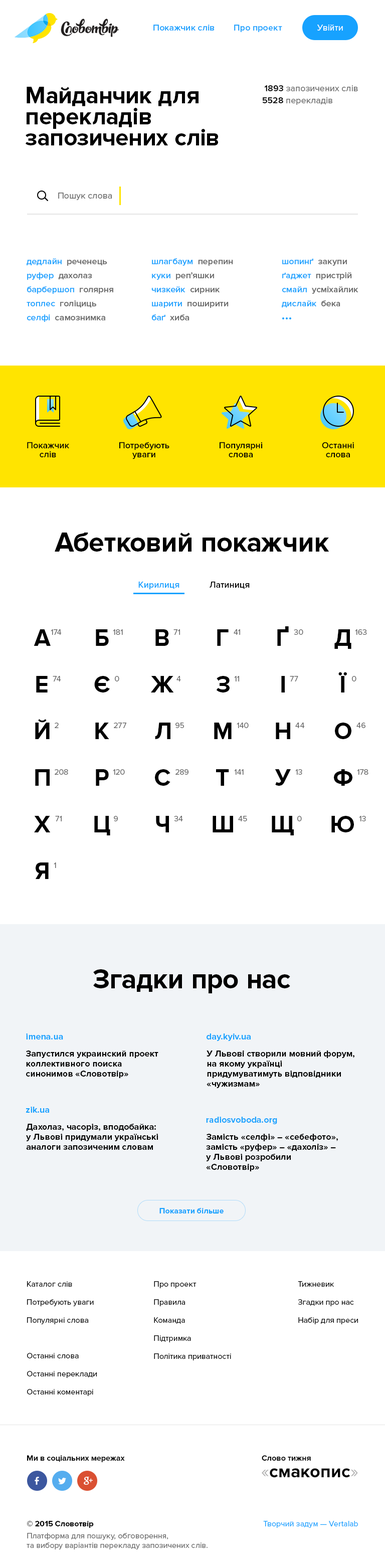
<style>
.page{position:relative;width:385px;height:1568px;background:#ffffff}
.page>*{position:absolute;margin:0}
.t1{font:9px "ProximaNova-Semibold";color:#17a2ff}
.t2{font:9px "ProximaNova-Regular";color:#ffffff}
.t3{font:24.1px/21.1px "ProximaNova-Bold";color:#000000}
.t4{font:9px "ProximaNova-Regular";color:#666666}
.t5{font:9px "ProximaNova-Semibold";color:#000000}
.t6{font:9px/14px "ProximaNova-Semibold";color:#666666}
.t7{font:9px/14px "ProximaNova-Semibold";color:#17a2ff}
.t8{font:9px/9px "ProximaNova-Semibold";color:#000000}
.t9{font:28.1px "ProximaNova-Bold";color:#000000}
.t10{font:24.1px "ProximaNova-Bold";color:#000000}
.t11{font:8px "ProximaNova-Regular";color:#666666}
.t12{font:9px "ProximaNova-Bold";color:#17a2ff}
.t13{font:9px/10px "ProximaNova-Bold";color:#000000}
.t14{font:8px "ProximaNova-Bold";color:#17a2ff}
.t15{font:8px/18.1px "ProximaNova-Regular";color:#000000}
.t16{font:8px/18.1px "ProximaNova-Regular";color:#010101}
.t17{font:8px "ProximaNova-Bold";color:#010101}
.t18{font:18px "ProximaNova-Bold";color:#000000}
.t19{font:18.1px "ProximaNova-Regular";color:#b3b3b3}
.t20{font:8px/11px "ProximaNova-Bold";color:#000000}
.t21{font:8px/12px "ProximaNova-Regular";color:#666666}
.t22{font:8px "ProximaNova-Regular";color:#17a2ff}
</style>
<div class="page">
<p class="t1" style="left:153px;top:25px;width:62px;height:6px">Покажчик слів</p>
<p class="t1" style="left:234px;top:25px;width:48px;height:7px">Про проект</p>
<p class="t2" style="left:317px;top:24px;width:26px;height:7px">Увійти</p>
<p class="t3" style="left:25px;top:87px;width:193px;height:58px">Майданчик для<br>перекладів<br>запозичених слів</p>
<p class="t4" style="left:264px;top:85px;width:94px;height:6px"><span class="t5">1893</span> запозичених слів</p>
<p class="t4" style="left:262px;top:97px;width:70px;height:8px"><span class="t5">5528</span> перекладів</p>
<p class="t4" style="left:58px;top:193px;width:54px;height:7px">Пошук слова</p>
<p class="t6" style="left:27px;top:258px;width:86px;height:64px"><span class="t7">дедлайн  </span>реченeць<br><span class="t7">руфер  </span>дахолаз<br><span class="t7">барбершоп  </span>голярня<br><span class="t7">топлес  </span>голіциць<br><span class="t7">селфі  </span>самознимка</p>
<p class="t7" style="left:151px;top:258px;width:82px;height:62px">шлагбаум  <span class="t6">перепин<br></span>куки  <span class="t6">реп’яшки<br></span>чизкейк  <span class="t6">сирник<br></span>шарити  <span class="t6">поширити<br></span>баґ  <span class="t6">хиба</span></p>
<p class="t6" style="left:282px;top:258px;width:77px;height:50px"><span class="t7">шопинґ  </span>закупи<br><span class="t7">ґаджет  </span>пристрій<br><span class="t7">смайл  </span>усміхайлик<br><span class="t7">дислайк  </span>бека</p>
<p class="t8" style="left:27px;top:442px;width:42px;height:15px;text-align:center">Покажчик<br>слів</p>
<p class="t8" style="left:119px;top:442px;width:50px;height:17px;text-align:center">Потребують<br>уваги</p>
<p class="t8" style="left:220px;top:442px;width:42px;height:15px;text-align:center">Популярні<br>слова</p>
<p class="t8" style="left:322px;top:442px;width:32px;height:15px;text-align:center">Останні<br>слова</p>
<p class="t9" style="left:55px;top:533px;width:274px;height:19px">Абетковий покажчик</p>
<p class="t1" style="left:138px;top:581px;width:42px;height:9px">Кирилиця</p>
<p class="t5" style="left:210px;top:581px;width:40px;height:8px">Латиниця</p>
<p class="t10" style="left:34px;top:629px;width:17px;height:17px">А</p>
<p class="t11" style="left:51px;top:629px;width:11px;height:6px">174</p>
<p class="t10" style="left:96px;top:629px;width:13px;height:17px">Б</p>
<p class="t11" style="left:113px;top:629px;width:10px;height:6px">181</p>
<p class="t10" style="left:155px;top:629px;width:14px;height:17px">В</p>
<p class="t11" style="left:173px;top:629px;width:7px;height:6px">71</p>
<p class="t10" style="left:217px;top:629px;width:12px;height:17px">Г</p>
<p class="t11" style="left:234px;top:629px;width:6px;height:6px">41</p>
<p class="t10" style="left:277px;top:626px;width:12px;height:20px">Ґ</p>
<p class="t11" style="left:294px;top:629px;width:9px;height:6px">30</p>
<p class="t10" style="left:334px;top:629px;width:18px;height:20px">Д</p>
<p class="t11" style="left:355px;top:629px;width:12px;height:6px">163</p>
<p class="t10" style="left:36px;top:676px;width:12px;height:16px">Е</p>
<p class="t11" style="left:53px;top:676px;width:8px;height:5px">74</p>
<p class="t10" style="left:94px;top:676px;width:16px;height:16px">Є</p>
<p class="t11" style="left:115px;top:676px;width:4px;height:5px">0</p>
<p class="t10" style="left:150px;top:676px;width:24px;height:16px">Ж</p>
<p class="t11" style="left:177px;top:676px;width:4px;height:5px">4</p>
<p class="t10" style="left:216px;top:676px;width:14px;height:16px">З</p>
<p class="t11" style="left:234px;top:676px;width:5px;height:5px">11</p>
<p class="t10" style="left:281px;top:676px;width:4px;height:16px">І</p>
<p class="t11" style="left:290px;top:676px;width:8px;height:5px">77</p>
<p class="t10" style="left:338px;top:672px;width:9px;height:20px">Ї</p>
<p class="t11" style="left:352px;top:676px;width:5px;height:5px">0</p>
<p class="t10" style="left:35px;top:719px;width:15px;height:20px">Й</p>
<p class="t11" style="left:55px;top:723px;width:4px;height:5px">2</p>
<p class="t10" style="left:95px;top:723px;width:14px;height:16px">К</p>
<p class="t11" style="left:114px;top:723px;width:12px;height:5px">277</p>
<p class="t10" style="left:155px;top:723px;width:15px;height:16px">Л</p>
<p class="t11" style="left:176px;top:723px;width:8px;height:5px">95</p>
<p class="t10" style="left:214px;top:723px;width:18px;height:16px">М</p>
<p class="t11" style="left:237px;top:723px;width:12px;height:5px">140</p>
<p class="t10" style="left:276px;top:723px;width:14px;height:16px">Н</p>
<p class="t11" style="left:295px;top:723px;width:10px;height:5px">44</p>
<p class="t10" style="left:335px;top:723px;width:17px;height:16px">О</p>
<p class="t11" style="left:357px;top:723px;width:9px;height:5px">46</p>
<p class="t10" style="left:35px;top:769px;width:15px;height:17px">П</p>
<p class="t11" style="left:55px;top:769px;width:13px;height:6px">208</p>
<p class="t10" style="left:96px;top:769px;width:13px;height:17px">Р</p>
<p class="t11" style="left:113px;top:769px;width:12px;height:6px">120</p>
<p class="t10" style="left:155px;top:769px;width:15px;height:17px">С</p>
<p class="t11" style="left:176px;top:769px;width:13px;height:6px">289</p>
<p class="t10" style="left:216px;top:769px;width:13px;height:17px">Т</p>
<p class="t11" style="left:234px;top:769px;width:10px;height:6px">141</p>
<p class="t10" style="left:275px;top:769px;width:16px;height:17px">У</p>
<p class="t11" style="left:295px;top:769px;width:7px;height:6px">13</p>
<p class="t10" style="left:334px;top:769px;width:19px;height:17px">Ф</p>
<p class="t11" style="left:357px;top:769px;width:12px;height:6px">178</p>
<p class="t10" style="left:34px;top:816px;width:17px;height:16px">Х</p>
<p class="t11" style="left:55px;top:816px;width:7px;height:5px">71</p>
<p class="t10" style="left:94px;top:816px;width:16px;height:19px">Ц</p>
<p class="t11" style="left:114px;top:816px;width:4px;height:5px">9</p>
<p class="t10" style="left:156px;top:816px;width:13px;height:16px">Ч</p>
<p class="t11" style="left:174px;top:816px;width:9px;height:5px">34</p>
<p class="t10" style="left:213px;top:816px;width:20px;height:16px">Ш</p>
<p class="t11" style="left:238px;top:816px;width:9px;height:5px">45</p>
<p class="t10" style="left:272px;top:816px;width:22px;height:19px">Щ</p>
<p class="t11" style="left:297px;top:816px;width:5px;height:5px">0</p>
<p class="t10" style="left:331px;top:816px;width:23px;height:16px">Ю</p>
<p class="t11" style="left:359px;top:816px;width:7px;height:5px">13</p>
<p class="t10" style="left:35px;top:862px;width:14px;height:17px">Я</p>
<p class="t11" style="left:54px;top:862px;width:2px;height:6px">1</p>
<p class="t9" style="left:93px;top:969px;width:197px;height:24px">Згадки про нас</p>
<p class="t12" style="left:26px;top:1033px;width:37px;height:6px">imena.ua</p>
<p class="t12" style="left:207px;top:1033px;width:44px;height:8px">day.kyiv.ua</p>
<p class="t13" style="left:26px;top:1051px;width:132px;height:27px">Запустился украинский проект<br>коллективного поиска<br>синонимов «Словотвір»</p>
<p class="t13" style="left:207px;top:1051px;width:148px;height:37px">У Львові створили мовний форум, на якому українці придумуватимуть відповідники<br>«чужизмам»</p>
<p class="t12" style="left:26px;top:1107px;width:23px;height:6px">zik.ua</p>
<p class="t12" style="left:206px;top:1117px;width:71px;height:7px">radiosvoboda.org</p>
<p class="t13" style="left:26px;top:1124px;width:132px;height:26px">Дахолаз, часоріз, вподобайка:<br>у Львові придумали українські<br>аналоги запозиченим словам</p>
<p class="t13" style="left:206px;top:1134px;width:132px;height:37px">Замість «селфі» – «себефото»,<br>замість «руфер» – «дахоліз» –<br>у Львові розробили<br>«Словотвір»</p>
<p class="t14" style="left:159px;top:1208px;width:65px;height:5px">Показати більше</p>
<p class="t15" style="left:27px;top:1281px;width:67px;height:43px">Каталог слів<br>Потребують уваги<br>Популярні слова</p>
<p class="t15" style="left:154px;top:1281px;width:77px;height:79px">Про проект<br>Правила<br>Команда<br>Підтримка<br>Політика приватності</p>
<p class="t16" style="left:298px;top:1281px;width:60px;height:43px">Тижневик<br>Згадки про нас<br>Набір для преси</p>
<p class="t15" style="left:27px;top:1353px;width:70px;height:43px">Останні слова<br>Останні переклади<br>Останні коментарі</p>
<p class="t17" style="left:27px;top:1455px;width:98px;height:7px">Ми в соціальних мережах</p>
<p class="t17" style="left:262px;top:1455px;width:49px;height:6px">Слово тижня</p>
<p class="t18" style="left:262px;top:1468px;width:96px;height:10px"><span class="t19">«</span>смакопис<span class="t19">»</span></p>
<p class="t11" style="left:27px;top:1521px;width:181px;height:28px"><span class="t20">© 2015 Словотвір<br></span><span class="t21">Платформа для пошуку, обговорення,<br></span>та вибору варіантів перекладу запозичених слів.</p>
<p class="t22" style="left:263px;top:1521px;width:95px;height:7px">Творчий задум — Vertalab</p>
</div>
